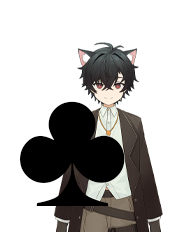
<style>
.page{position:relative;width:180px;height:240px;background:#ffffff}
.page>*{position:absolute;margin:0}
.t1{font:173.3px "STXihei";color:#000000}
</style>
<div class="page">
<p class="t1" style="left:20px;top:101px;width:105px;height:105px">♣</p>
</div>
